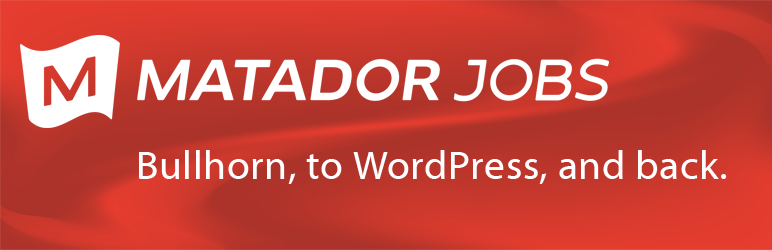
<style>
.page{position:relative;width:772px;height:250px}
.page>*{position:absolute;margin:0}
.t1{font:40px "MyriadWebPro";letter-spacing:0.015em;color:#ffffff}
</style>
<div class="page">
<p class="t1" style="left:139px;top:150px;width:588px;height:34px">Bullhorn, to WordPress, and back.</p>
</div>
